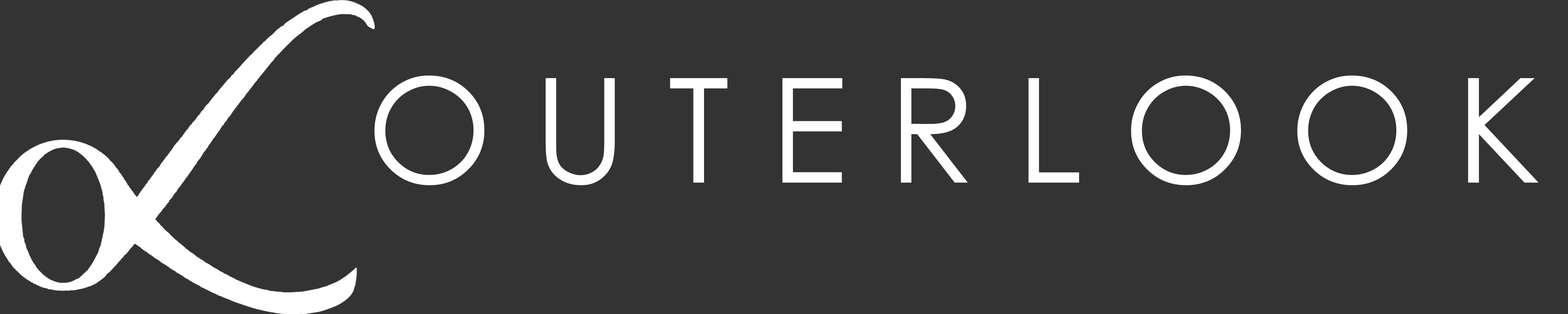
<style>
.page{position:relative;width:1568px;height:314px;background:#333333}
.page>*{position:absolute;margin:0}
.t1{font:145.1px "CenturyGothic";color:#ffffff}
</style>
<div class="page">
<p class="t1" style="left:374px;top:75px;width:1165px;height:110px">O U T E R L O O K</p>
</div>
